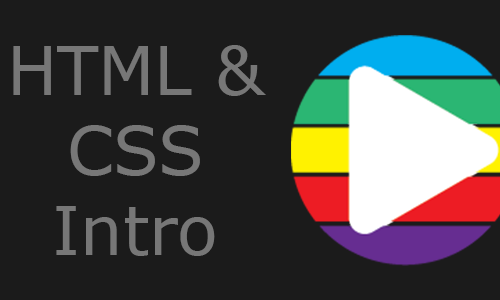
<style>
.page{position:relative;width:500px;height:300px;background:#1b1b1b}
.page>*{position:absolute;margin:0}
.t1{font:66.7px "Verdana";color:#777777}
</style>
<div class="page">
<p class="t1" style="left:13px;top:45px;width:253px;height:211px;text-align:center">HTML &amp;<br>CSS<br>Intro</p>
</div>
